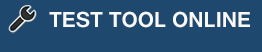
<style>
.page{position:relative;width:262px;height:52px;background:#1e486d}
.page>*{position:absolute;margin:0}
.t1{font:22.7px "Gautami-Bold";color:#f7f9fa}
</style>
<div class="page">
<p class="t1" style="left:49px;top:11px;width:201px;height:17px">TEST TOOL ONLINE</p>
</div>
